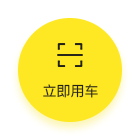
<style>
.page{position:relative;width:140px;height:140px;background:#ffffff}
.page>*{position:absolute;margin:0}
.t1{font:14px "PingFang-SC-Medium";color:#222118}
</style>
<div class="page">
<p class="t1" style="left:43px;top:84px;width:55px;height:14px">立即用车</p>
</div>
